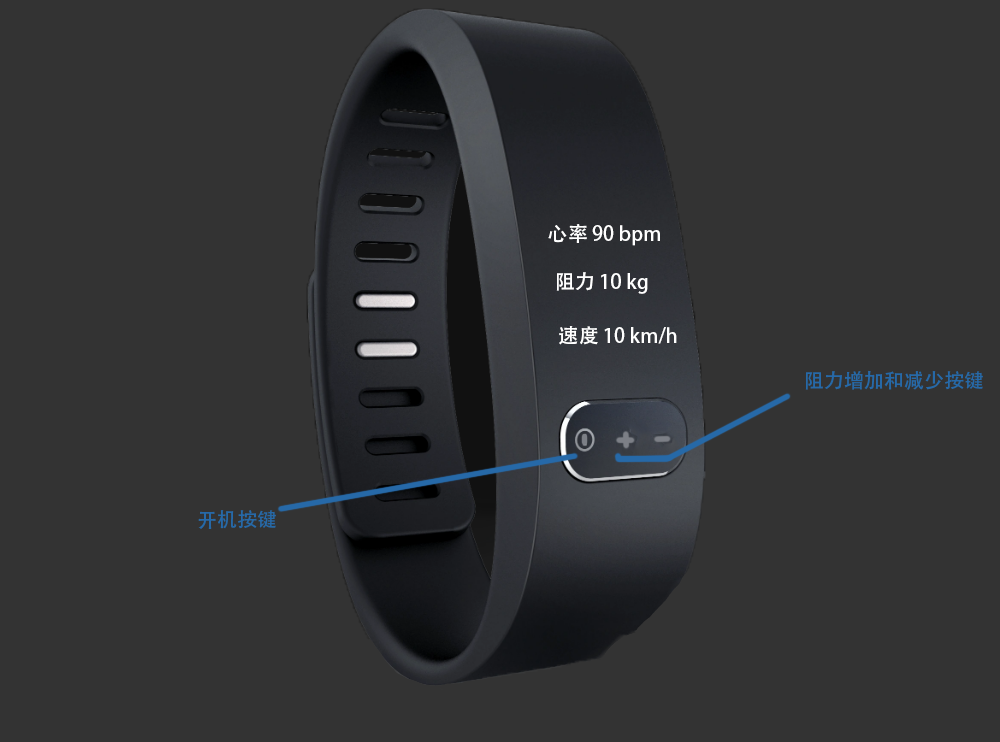
<style>
.page{position:relative;width:1000px;height:742px;background:#333333}
.page>*{position:absolute;margin:0}
.t1{font:12px "AdobeHeitiStd-Regular";color:#ffffff}
.t2{font:12px "AdobeHeitiStd-Regular";color:#2669a8}
</style>
<div class="page">
<p class="t1" style="left:548px;top:224px;width:112px;height:22px">心率 90 bpm</p>
<p class="t1" style="left:556px;top:272px;width:92px;height:22px">阻力 10 kg</p>
<p class="t1" style="left:559px;top:326px;width:118px;height:19px">速度 10 km/h</p>
<p class="t2" style="left:805px;top:370px;width:178px;height:20px">阻力增加和减少按键</p>
<p class="t2" style="left:198px;top:510px;width:78px;height:19px">开机按键</p>
</div>
